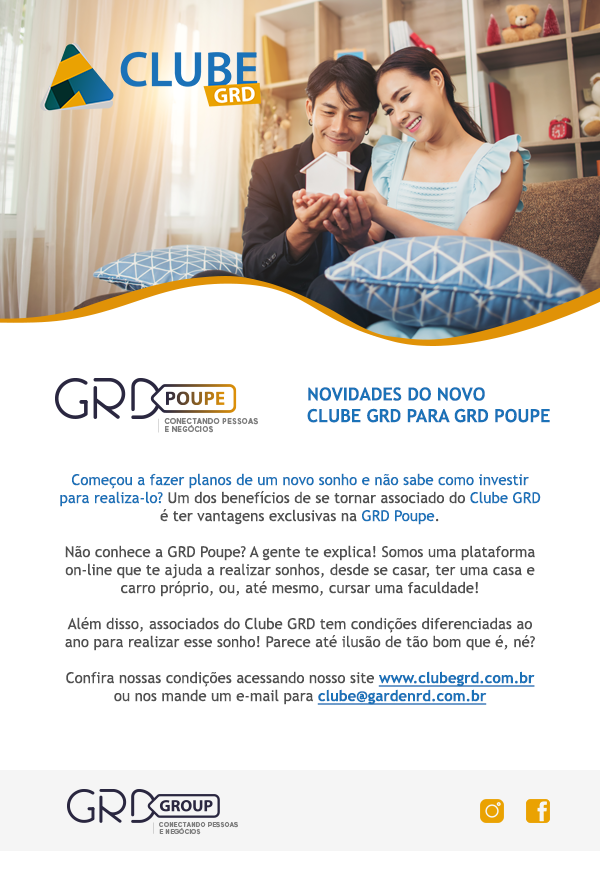
<style>
.page{position:relative;width:600px;height:882px;background:#ffffff}
.page>*{position:absolute;margin:0}
.t1{font:18px "TrebuchetMS-Bold";color:#1b72b8;text-transform:uppercase}
.t2{font:15px "TrebuchetMS";color:#505050}
.t3{font:15px "TrebuchetMS";color:#1b72b8}
.t4{font:15px "TrebuchetMS-Bold";color:#1b72b8;text-decoration:underline}
</style>
<div class="page">
<p class="t1" style="left:307px;top:387px;width:243px;height:36px">Novidades do NOVO<br>CLUBE GRD para GRD Poupe</p>
<p class="t2" style="left:60px;top:473px;width:481px;height:232px;text-align:center"><span class="t3">Começou a fazer planos de um novo sonho e não sabe como investir para realiza-lo?</span> Um dos benefícios de se tornar associado do <span class="t3">Clube GRD</span> é ter vantagens exclusivas na <span class="t3">GRD Poupe</span>.<br><br>Não conhece a GRD Poupe? A gente te explica! Somos uma plataforma on-line que te ajuda a realizar sonhos, desde se casar, ter uma casa e carro próprio, ou, até mesmo, cursar uma faculdade!<br><br>Além disso, associados do Clube GRD tem condições diferenciadas ao ano para realizar esse sonho! Parece até ilusão de tão bom que é, né?<br><br>Confira nossas condições acessando nosso site <span class="t4">www.clubegrd.com.br</span><br>ou nos mande um e-mail para <span class="t4">clube@gardenrd.com.br</span></p>
</div>
